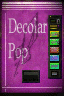
<style>
.page{position:relative;width:64px;height:96px}
.page>*{position:absolute;margin:0}
.t1{font:20.9px/24.7px "PalatinoLinotype-Roman";color:#d6b7cf;scale:0.54 1}
</style>
<div class="page">
<p class="t1" style="left:8px;top:17px;width:39px;height:47px">Decolar<br>Pop</p>
</div>
